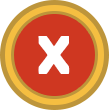
<style>
.page{position:relative;width:109px;height:110px;background:#cf3721}
.page>*{position:absolute;margin:0}
.t1{font:55.6px "BerlinSansFBDemi-Bold";color:#ffffff}
</style>
<div class="page">
<p class="t1" style="left:38px;top:36px;width:32px;height:38px">X</p>
</div>
